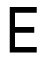
<style>
.page{position:relative;width:48px;height:59px;background:#ffffff}
.page>*{position:absolute;margin:0}
.t1{font:82.9px "PrintAble4URegular";color:#000000;scale:0.94 1}
</style>
<div class="page">
<p class="t1" style="left:9px;top:7px;width:28px;height:46px">E</p>
</div>
